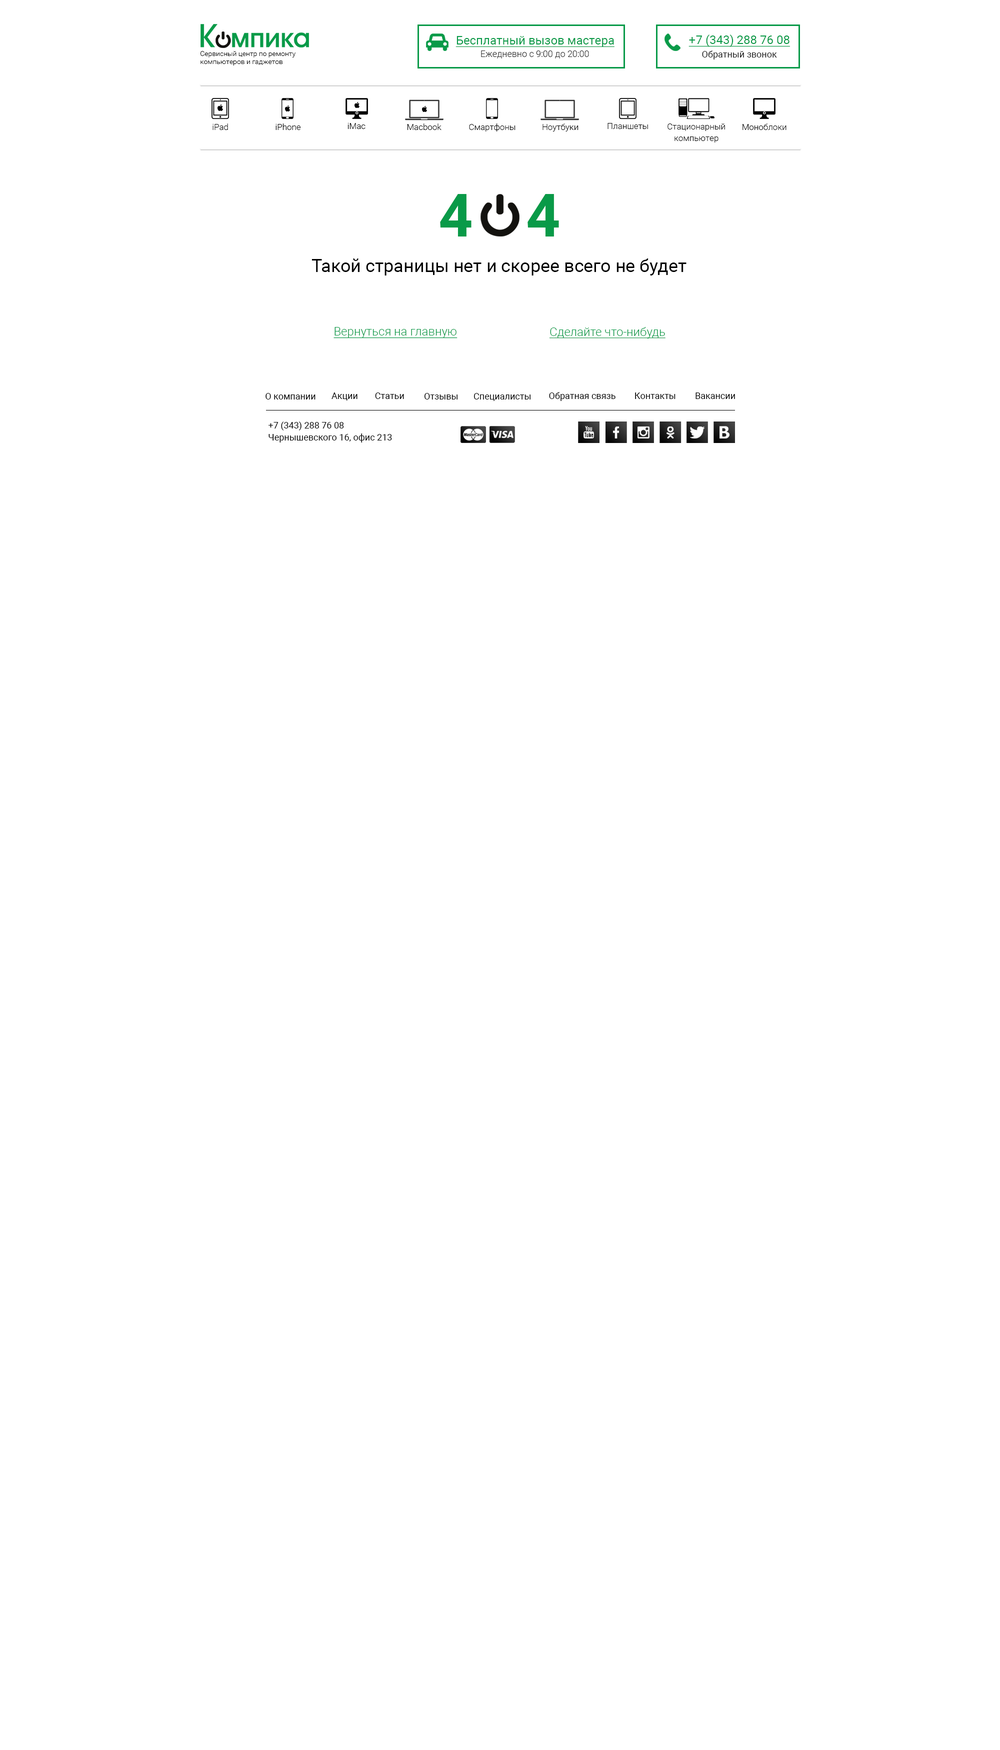
<style>
.page{position:relative;width:1000px;height:1750px;background:#ffffff}
.page>*{position:absolute;margin:0}
.t1{font:12px "Roboto-Regular";color:#099a48;text-decoration:underline}
.t2{font:7px/8px "Roboto-Light";color:#000000}
.t3{font:9px "Roboto-Light";color:#262626}
.t4{font:9px "Roboto-Regular";color:#1a1a1a}
.t5{font:8.5px "Roboto-Light";color:#000000}
.t6{font:8.5px/11.5px "Roboto-Light";color:#000000}
.t7{font:59.9px "Roboto-Bold";color:#099a48}
.t8{font:18px "Roboto-Regular";color:#000000}
.t9{font:12px "Roboto-Light";color:#099a48;text-decoration:underline}
.t10{font:9px "Roboto-Regular";color:#000000}
</style>
<div class="page">
<p class="t1" style="left:456px;top:36px;width:158px;height:11px">Бесплатный вызов мастера</p>
<p class="t1" style="left:688px;top:34px;width:102px;height:13px">+7 (343) 288 76 08</p>
<p class="t2" style="left:200px;top:51px;width:96px;height:15px">Сервисный центр по ремонту<br>компьютеров и гаджетов</p>
<p class="t3" style="left:481px;top:50px;width:108px;height:8px">Ежедневно с 9:00 до 20:00</p>
<p class="t4" style="left:702px;top:50px;width:75px;height:10px">Обратный звонок</p>
<p class="t5" style="left:212px;top:124px;width:16px;height:6px">iPad</p>
<p class="t5" style="left:276px;top:124px;width:24px;height:6px">iPhone</p>
<p class="t5" style="left:348px;top:123px;width:18px;height:6px">iMac</p>
<p class="t5" style="left:407px;top:124px;width:35px;height:6px">Macbook</p>
<p class="t5" style="left:469px;top:124px;width:47px;height:8px">Смартфоны</p>
<p class="t5" style="left:542px;top:124px;width:36px;height:8px">Ноутбуки</p>
<p class="t5" style="left:608px;top:123px;width:40px;height:6px">Планшеты</p>
<p class="t6" style="left:668px;top:124px;width:57px;height:18px;text-align:center">Стационарный<br>компьютер</p>
<p class="t5" style="left:742px;top:124px;width:44px;height:6px">Моноблоки</p>
<p class="t7" style="left:440px;top:194px;width:32px;height:42px">4</p>
<p class="t7" style="left:528px;top:194px;width:31px;height:42px">4</p>
<p class="t8" style="left:312px;top:258px;width:374px;height:18px">Такой страницы нет и скорее всего не будет</p>
<p class="t9" style="left:334px;top:327px;width:124px;height:11px">Вернуться на главную</p>
<p class="t9" style="left:549px;top:327px;width:117px;height:11px">Сделайте что-нибудь</p>
<p class="t10" style="left:266px;top:393px;width:50px;height:7px">О компании</p>
<p class="t10" style="left:332px;top:392px;width:26px;height:8px">Акции</p>
<p class="t10" style="left:375px;top:392px;width:29px;height:7px">Статьи</p>
<p class="t10" style="left:424px;top:393px;width:34px;height:7px">Отзывы</p>
<p class="t10" style="left:474px;top:393px;width:56px;height:8px">Специалисты</p>
<p class="t10" style="left:549px;top:392px;width:67px;height:9px">Обратная связь</p>
<p class="t10" style="left:635px;top:392px;width:41px;height:7px">Контакты</p>
<p class="t10" style="left:696px;top:392px;width:39px;height:7px">Вакансии</p>
<p class="t10" style="left:268px;top:422px;width:76px;height:8px">+7 (343) 288 76 08</p>
<p class="t10" style="left:268px;top:434px;width:124px;height:8px">Чернышевского 16, офис 213</p>
</div>
